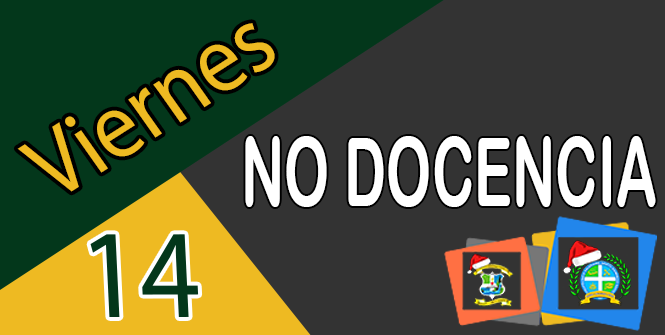
<style>
.page{position:relative;width:665px;height:335px;background:#333333}
.page>*{position:absolute;margin:0}
.t1{font:96.3px "MyriadPro-Regular";color:#eeba22;scale:0.91 1}
.t2{font:95.6px "ArialRoundedMTBold";color:#ffffff;scale:0.6 1}
</style>
<div class="page">
<p class="t1" style="left:17px;top:23px;width:258px;height:169px;rotate:-33deg">Viernes</p>
<p class="t2" style="left:245px;top:136px;width:411px;height:71px">NO DOCENCIA</p>
</div>
